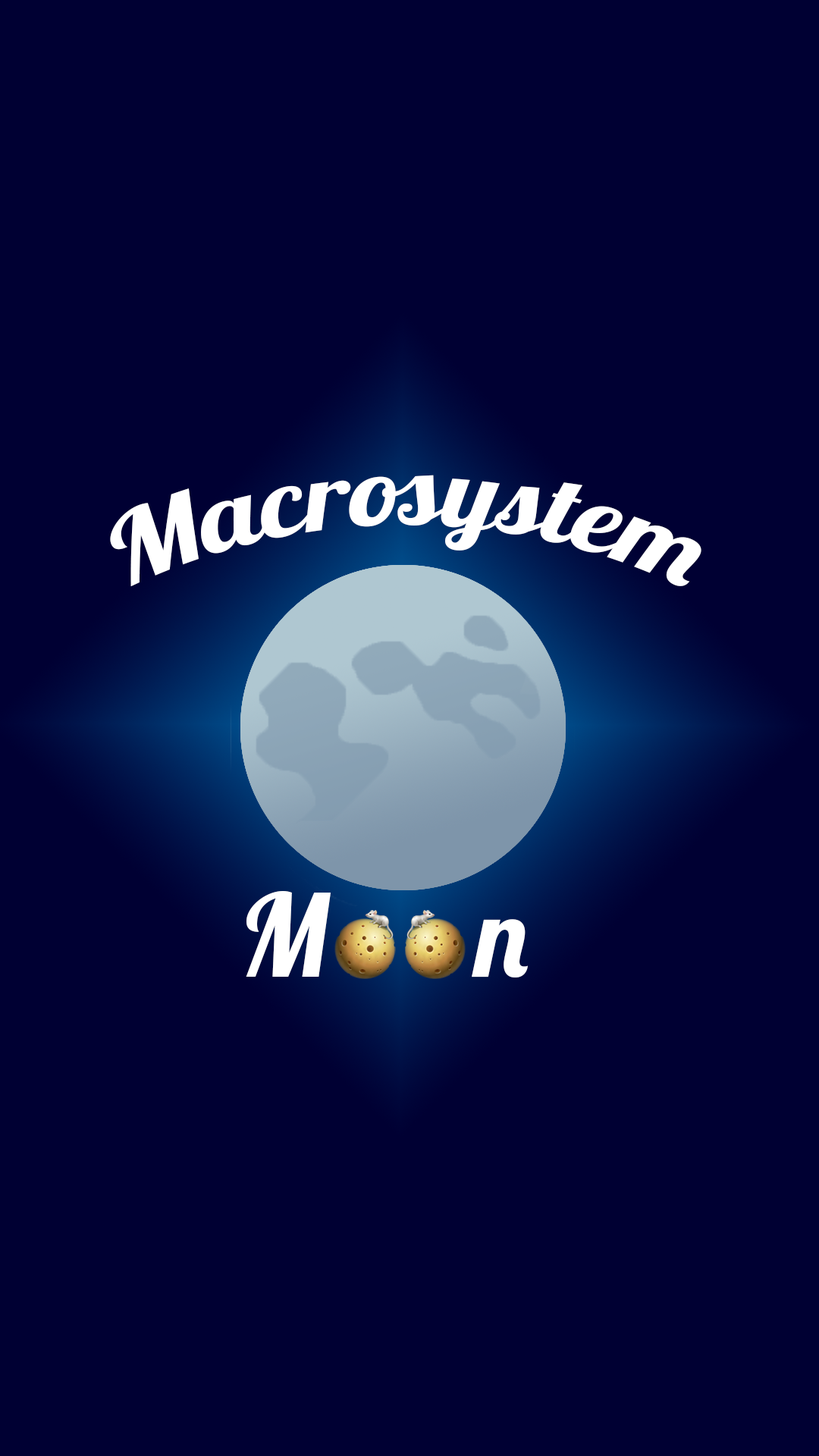
<style>
.page{position:relative;width:819px;height:1456px;background:#000033}
.page>*{position:absolute;margin:0}
.t1{font:94.8px "Lobster1.4";color:#ffffff}
.t2{font:113.7px "Lobster1.4";color:#ffffff}
</style>
<div class="page">
<p class="t1" style="left:110px;top:475px;width:591px;height:112px">Macrosystem</p>
<p class="t2" style="left:246px;top:891px;width:282px;height:86px">M      n</p>
</div>
